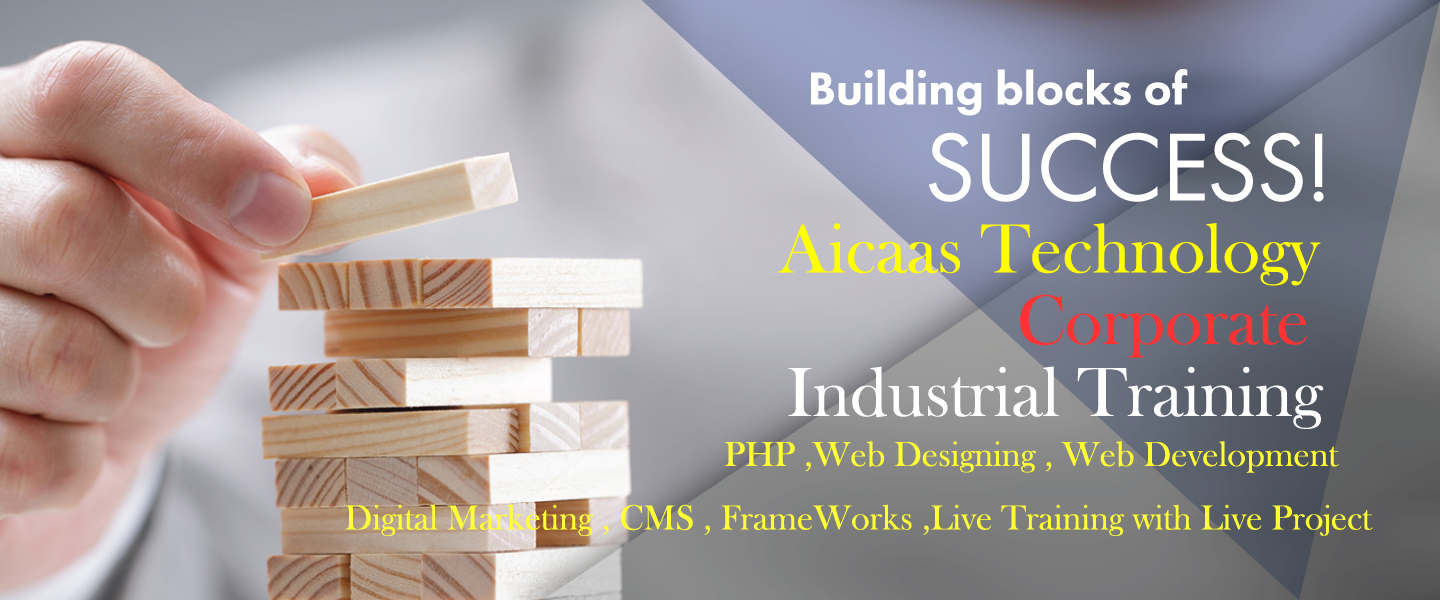
<style>
.page{position:relative;width:1440px;height:600px}
.page>*{position:absolute;margin:0}
.t1{font:72px "BaskOldFace";color:#ffff00}
.t2{font:72px "BaskOldFace";color:#ff3333}
.t3{font:72px "BaskOldFace";color:#ffffff}
.t4{font:36px "BaskOldFace";color:#ffff33}
</style>
<div class="page">
<p class="t1" style="left:777px;top:223px;width:544px;height:63px">Aicaas Technology</p>
<p class="t2" style="left:1020px;top:294px;width:287px;height:64px">Corporate</p>
<p class="t3" style="left:788px;top:366px;width:536px;height:63px">Industrial Training</p>
<p class="t4" style="left:724px;top:441px;width:615px;height:32px">PHP ,Web Designing , Web Development</p>
<p class="t4" style="left:345px;top:504px;width:1028px;height:32px">Digital Marketing , CMS , FrameWorks ,Live Training with Live Project</p>
</div>
